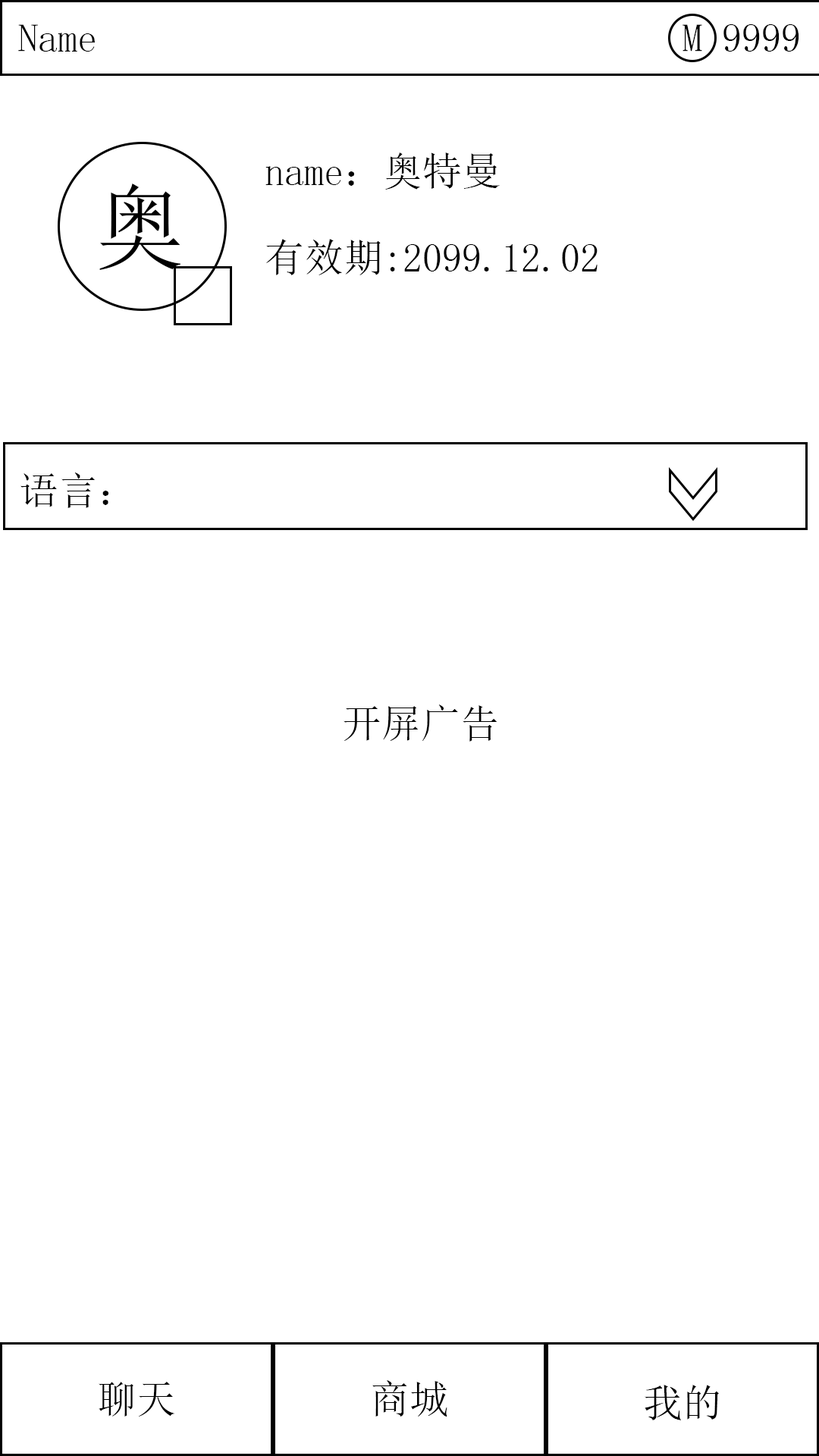
<style>
.page{position:relative;width:819px;height:1456px;background:#ffffff}
.page>*{position:absolute;margin:0}
.t1{font:39.4px "SimSun";color:#000000}
.t2{font:92.4px "SimSun";color:#000000}
</style>
<div class="page">
<p class="t1" style="left:18px;top:24px;width:77px;height:28px">Name</p>
<p class="t1" style="left:682px;top:24px;width:20px;height:28px">M</p>
<p class="t1" style="left:723px;top:24px;width:76px;height:28px">9999</p>
<p class="t1" style="left:265px;top:152px;width:235px;height:38px">name：奥特曼</p>
<p class="t2" style="left:99px;top:184px;width:81px;height:86px">奥</p>
<p class="t1" style="left:266px;top:239px;width:332px;height:36px">有效期:2099.12.02</p>
<p class="t1" style="left:20px;top:472px;width:88px;height:36px">语言：</p>
<p class="t1" style="left:344px;top:704px;width:153px;height:38px">开屏广告</p>
<p class="t1" style="left:99px;top:1382px;width:75px;height:35px">聊天</p>
<p class="t1" style="left:372px;top:1380px;width:75px;height:37px">商城</p>
<p class="t1" style="left:645px;top:1385px;width:74px;height:35px">我的</p>
</div>
